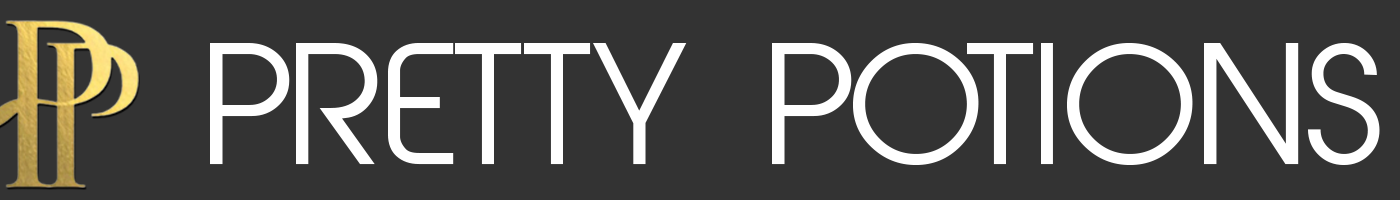
<style>
.page{position:relative;width:1400px;height:200px;background:#333333}
.page>*{position:absolute;margin:0}
.t1{font:155px "AbeatbyKai";color:#ffffff}
</style>
<div class="page">
<p class="t1" style="left:210px;top:43px;width:1170px;height:122px">PRETTY POTIONS</p>
</div>
